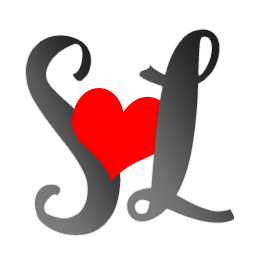
<style>
.page{position:relative;width:256px;height:256px;background:#ffffff}
.page>*{position:absolute;margin:0}
.t1{font:260px "Sophia";letter-spacing:-0.01em;color:#ffffff}
</style>
<div class="page">
<p class="t1" style="left:126px;top:28px;width:109px;height:196px">L</p>
<p class="t1" style="left:25px;top:34px;width:97px;height:202px">S</p>
</div>
